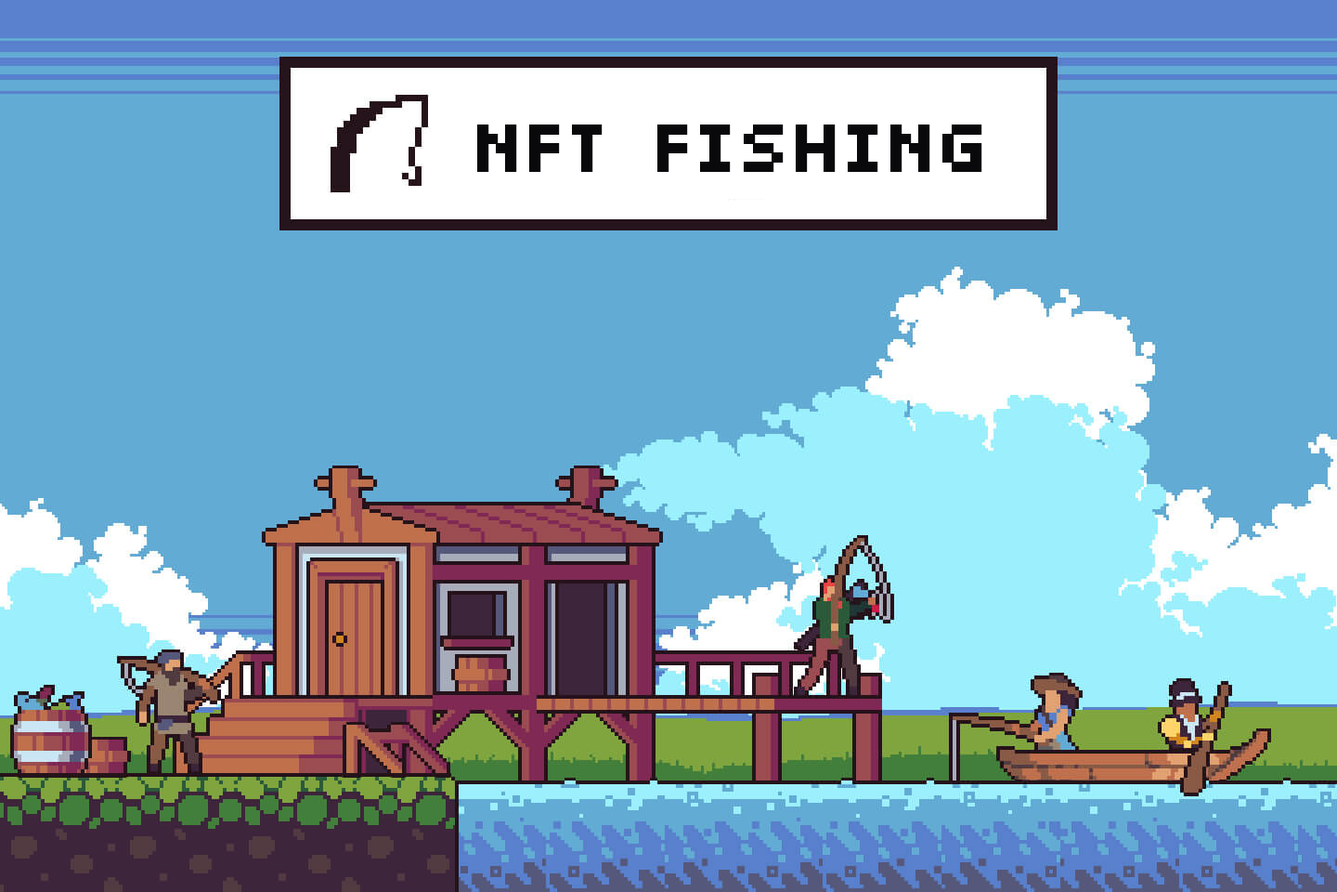
<style>
.page{position:relative;width:1337px;height:892px;background:#62abd4}
.page>*{position:absolute;margin:0}
.t1{font:74.3px "04b03";letter-spacing:0.05em;color:#09090b;font-weight:bold}
</style>
<div class="page">
<p class="t1" style="left:477px;top:124px;width:506px;height:48px">NFT FISHING</p>
</div>
